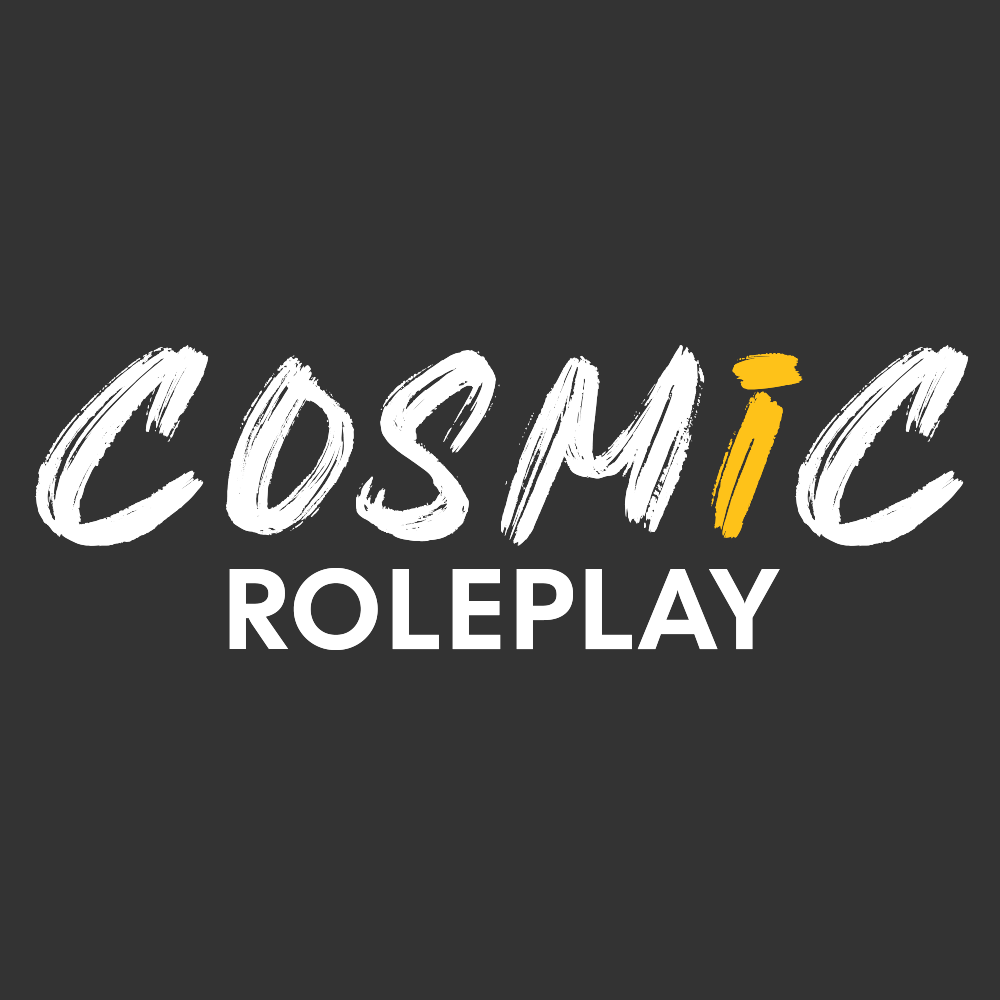
<style>
.page{position:relative;width:1000px;height:1000px;background:#333333}
.page>*{position:absolute;margin:0}
.t1{font:286.8px "KirensBrushDEMO-Regular";letter-spacing:0.05em;color:#ffffff}
.t2{font:286.8px "KirensBrushDEMO-Regular";letter-spacing:0.05em;color:#fec219}
.t3{font:115.4px "CalSans-Regular";letter-spacing:0.05em;color:#ffffff;text-transform:uppercase}
</style>
<div class="page">
<p class="t1" style="left:35px;top:345px;width:934px;height:202px">COSM<span class="t2">i</span>C</p>
<p class="t3" style="left:229px;top:568px;width:551px;height:82px">Roleplay</p>
</div>
